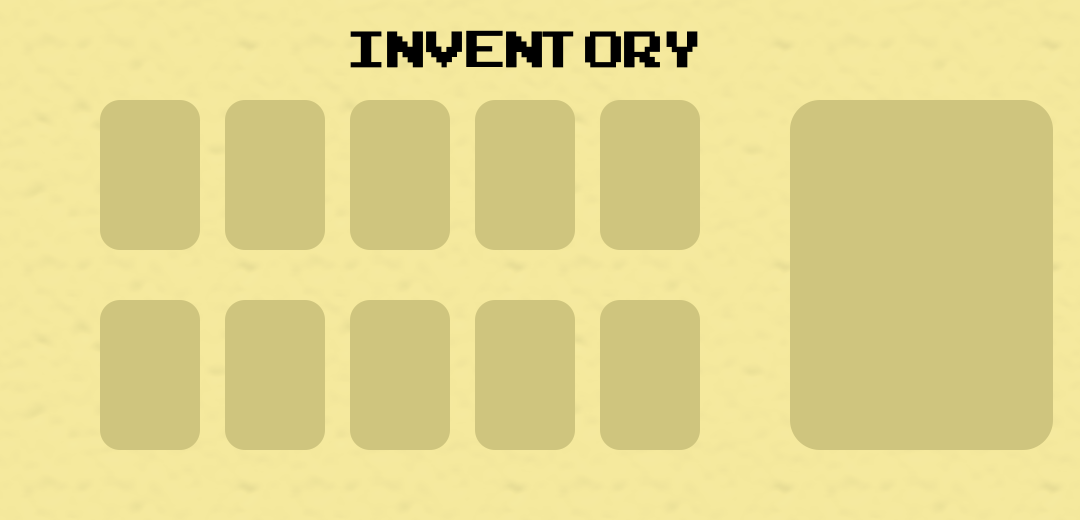
<style>
.page{position:relative;width:1080px;height:520px;background:#cfc57e}
.page>*{position:absolute;margin:0}
.t1{font:72px "ArcadeClassic";color:#000000}
</style>
<div class="page">
<p class="t1" style="left:350px;top:30px;width:348px;height:38px">Inventory</p>
</div>
